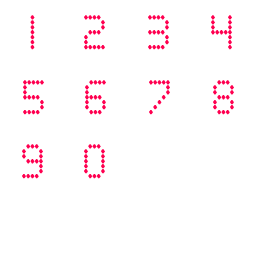
<style>
.page{position:relative;width:256px;height:256px;background:#ffffff}
.page>*{position:absolute;margin:0}
.t1{font:48px "ScoreBoard";letter-spacing:-0.024em;color:#ff0050}
</style>
<div class="page">
<p class="t1" style="left:30px;top:15px;width:5px;height:35px">1</p>
<p class="t1" style="left:84px;top:15px;width:21px;height:35px">2</p>
<p class="t1" style="left:148px;top:15px;width:21px;height:35px">3</p>
<p class="t1" style="left:211px;top:15px;width:21px;height:35px">4</p>
<p class="t1" style="left:23px;top:80px;width:21px;height:35px">5</p>
<p class="t1" style="left:85px;top:80px;width:21px;height:35px">6</p>
<p class="t1" style="left:149px;top:80px;width:21px;height:35px">7</p>
<p class="t1" style="left:213px;top:80px;width:21px;height:35px">8</p>
<p class="t1" style="left:22px;top:144px;width:21px;height:35px">9</p>
<p class="t1" style="left:84px;top:144px;width:21px;height:35px">0</p>
</div>
